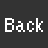
<style>
.page{position:relative;width:48px;height:48px;background:#333333}
.page>*{position:absolute;margin:0}
.t1{font:24px "OrangeKid-Regular";color:#ffffff}
</style>
<div class="page">
<p class="t1" style="left:5px;top:18px;width:38px;height:14px">Back</p>
</div>
